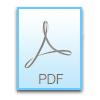
<style>
.page{position:relative;width:100px;height:100px;background:#ffffff}
.page>*{position:absolute;margin:0}
.t1{font:24px "HelveticaNeue";letter-spacing:-0.05em;color:#6e6e6e}
</style>
<div class="page">
<p class="t1" style="left:39px;top:74px;width:25px;height:10px">PDF</p>
</div>
